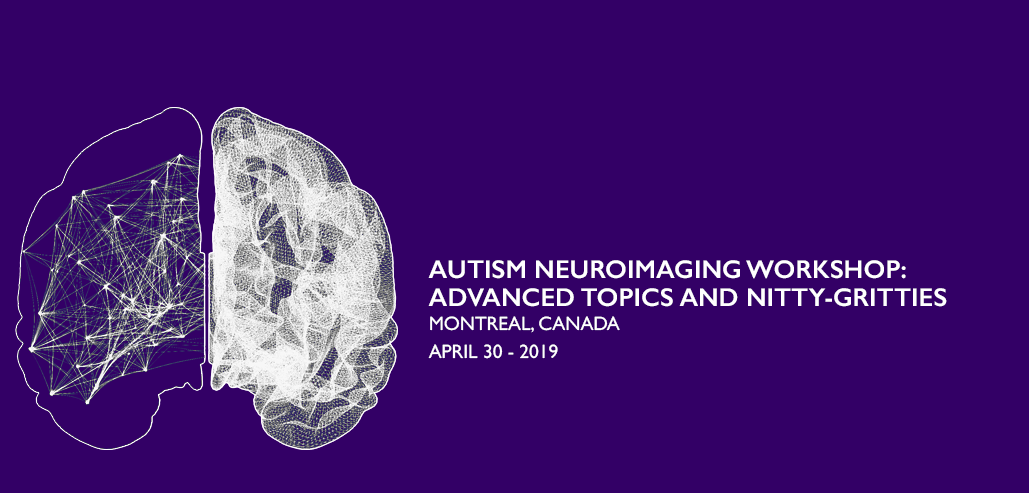
<style>
.page{position:relative;width:1029px;height:493px;background:#330066}
.page>*{position:absolute;margin:0}
.t1{font:44.3px/27.7px "GillSans-SemiBold";color:#ffffff}
.t2{font:33.3px/27.7px "GillSans";color:#ffffff}
</style>
<div class="page">
<p class="t1" style="left:428px;top:260px;width:519px;height:99px">AUTISM NEUROIMAGING WORKSHOP: <br>ADVANCED TOPICS AND NITTY-GRITTIES<br><span class="t2">MONTREAL, CANADA  <br>APRIL 30 - 2019</span></p>
</div>
